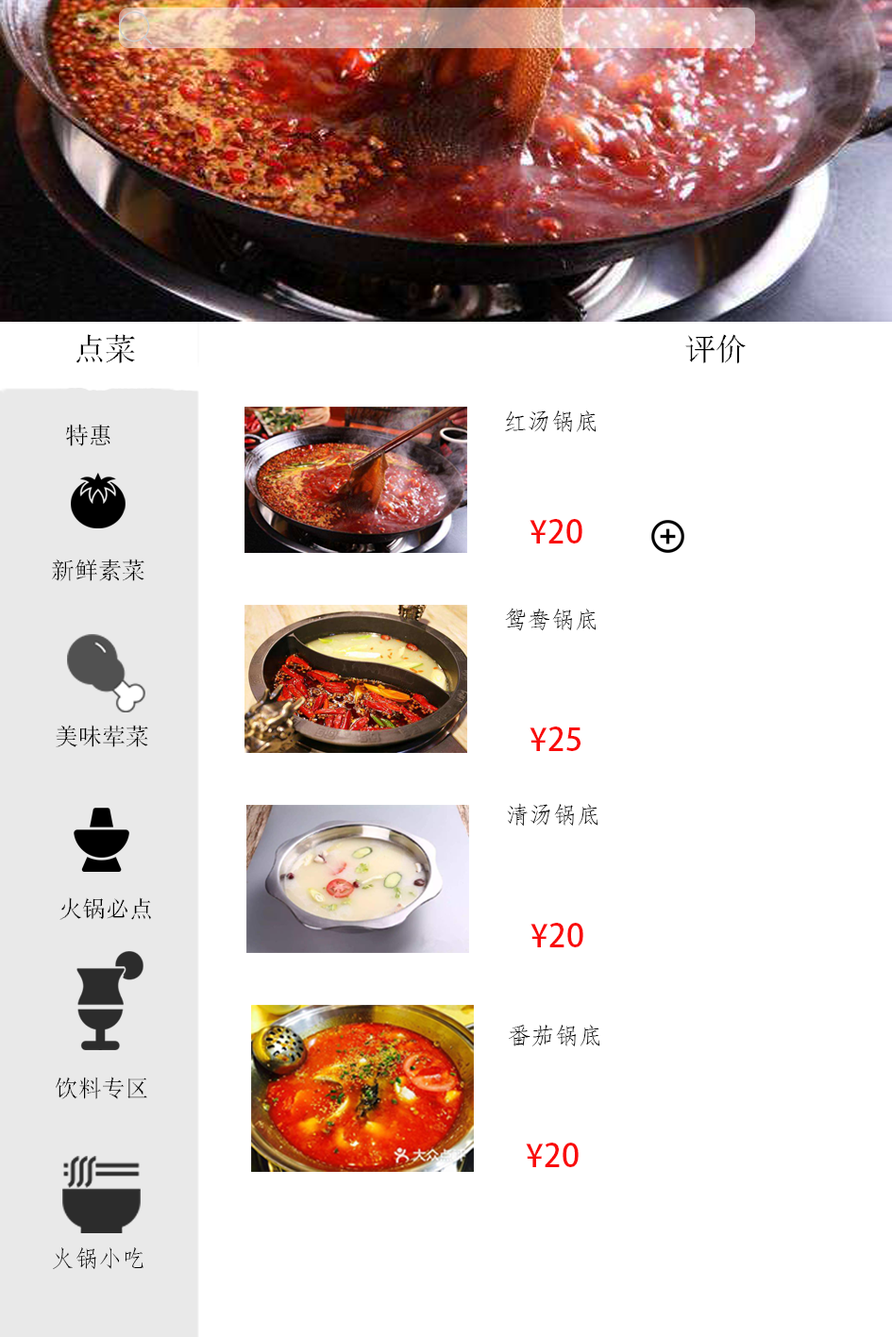
<style>
.page{position:relative;width:892px;height:1337px;background:#ffffff}
.page>*{position:absolute;margin:0}
.t1{font:31.5px "Fixedsys";color:#000000}
.t2{font:23.6px "STFangsong";color:#000000}
.t3{font:23.6px "Fixedsys";color:#000000}
.t4{font:31.5px "AdobeHeitiStd-Regular";color:#f90c0c}
.t5{font:23.6px "STFangsong";color:#080808}
.t6{font:23.6px "STFangsong";color:#030303}
</style>
<div class="page">
<p class="t1" style="left:76px;top:334px;width:59px;height:29px">点菜</p>
<p class="t1" style="left:685px;top:334px;width:60px;height:30px">评价</p>
<p class="t2" style="left:505px;top:410px;width:91px;height:22px">红汤锅底</p>
<p class="t3" style="left:66px;top:424px;width:44px;height:22px">特惠</p>
<p class="t4" style="left:529px;top:519px;width:53px;height:25px">¥20</p>
<p class="t3" style="left:52px;top:559px;width:92px;height:22px">新鲜素菜</p>
<p class="t5" style="left:505px;top:608px;width:91px;height:23px">鸳鸯锅底</p>
<p class="t3" style="left:56px;top:725px;width:92px;height:22px">美味荤菜</p>
<p class="t4" style="left:529px;top:727px;width:51px;height:24px">¥25</p>
<p class="t6" style="left:507px;top:803px;width:91px;height:24px">清汤锅底</p>
<p class="t3" style="left:59px;top:897px;width:92px;height:23px">火锅必点</p>
<p class="t4" style="left:530px;top:923px;width:53px;height:24px">¥20</p>
<p class="t6" style="left:509px;top:1025px;width:91px;height:22px">番茄锅底</p>
<p class="t3" style="left:56px;top:1077px;width:91px;height:22px">饮料专区</p>
<p class="t4" style="left:526px;top:1143px;width:52px;height:24px">¥20</p>
<p class="t2" style="left:53px;top:1248px;width:90px;height:21px">火锅小吃</p>
</div>
